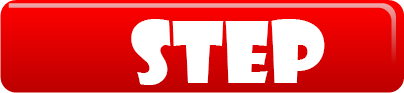
<style>
.page{position:relative;width:404px;height:93px;background:#ffffff}
.page>*{position:absolute;margin:0}
.t1{font:83.3px "ShowcardGothic-Reg";color:#ffffff}
</style>
<div class="page">
<p class="t1" style="left:131px;top:19px;width:194px;height:66px">Step</p>
</div>
